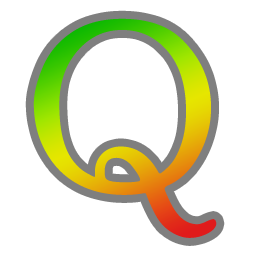
<style>
.page{position:relative;width:256px;height:256px;background:#ffffff}
.page>*{position:absolute;margin:0}
.t1{font:239.3px "PoorRichard-Regular"}
</style>
<div class="page">
<p class="t1" style="left:33px;top:18px;width:184px;height:220px">Q</p>
</div>
